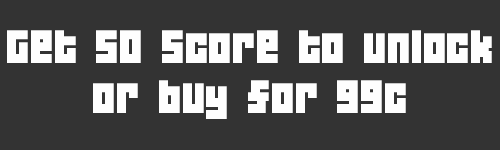
<style>
.page{position:relative;width:500px;height:150px;background:#333333}
.page>*{position:absolute;margin:0}
.t1{font:41.7px "04b19";color:#fefefe}
</style>
<div class="page">
<p class="t1" style="left:7px;top:30px;width:485px;height:89px;text-align:center">Get 50 score to unlock<br>or buy for 99c</p>
</div>
